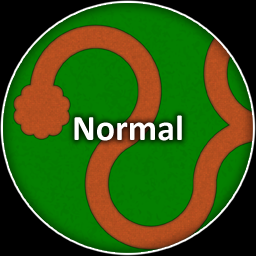
<style>
.page{position:relative;width:256px;height:256px;background:#000000}
.page>*{position:absolute;margin:0}
.t1{font:36px "Calibri-Bold";color:#ffffff}
</style>
<div class="page">
<p class="t1" style="left:74px;top:115px;width:108px;height:26px">Normal</p>
</div>
